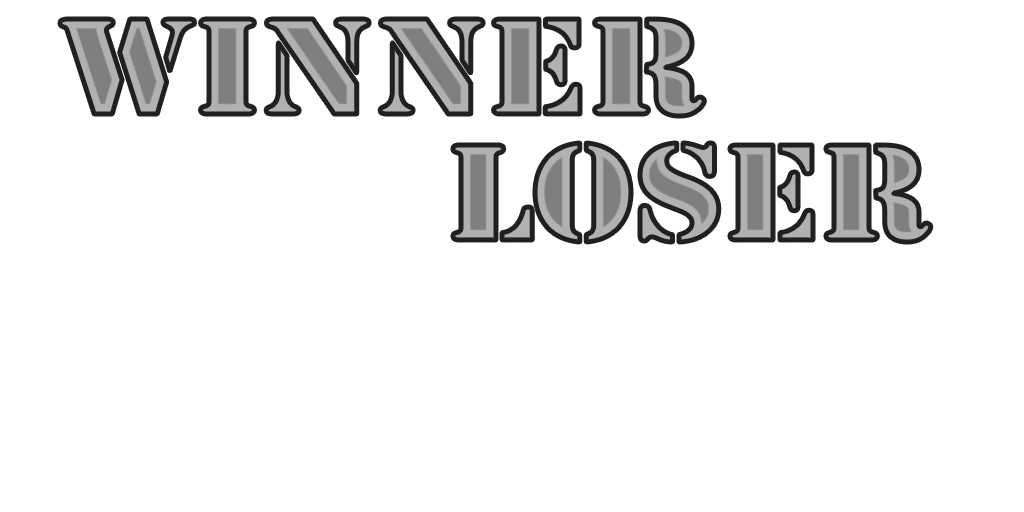
<style>
.page{position:relative;width:1024px;height:512px;background:#ffffff}
.page>*{position:absolute;margin:0}
.t1{font:126.8px "StencilStd";scale:1.19 1}
.t2{font:126.8px "StencilStd";scale:1.13 1}
</style>
<div class="page">
<p class="t1" style="left:60px;top:19px;width:645px;height:97px">Winner</p>
<p class="t2" style="left:452px;top:143px;width:479px;height:99px">Loser</p>
</div>
